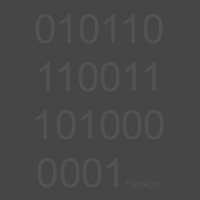
<style>
.page{position:relative;width:200px;height:200px;background:#464646}
.page>*{position:absolute;margin:0}
.t1{font:40px "ArialMT";color:#686868}
.t2{font:9px "ArialMT";color:#686868}
</style>
<div class="page">
<p class="t1" style="left:35px;top:14px;width:129px;height:174px;text-align:center">010110<br>110011<br>101000<br>0001<span class="t2">PasteBin</span></p>
</div>
